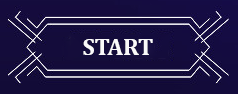
<style>
.page{position:relative;width:238px;height:94px}
.page>*{position:absolute;margin:0}
.t1{font:24px "Cambria-Bold";color:#fafafa}
</style>
<div class="page">
<p class="t1" style="left:83px;top:39px;width:70px;height:16px">START</p>
</div>
